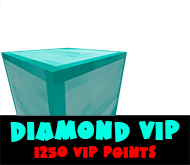
<style>
.page{position:relative;width:190px;height:165px;background:#ffffff}
.page>*{position:absolute;margin:0}
.t1{font:25px "HotMustardBTN";color:#01ffe4}
.t2{font:15px "HotMustardBTN";color:#ff0000}
</style>
<div class="page">
<p class="t1" style="left:10px;top:120px;width:170px;height:22px">dIAMOND vip</p>
<p class="t2" style="left:34px;top:145px;width:122px;height:13px">1250 VIP Points</p>
</div>
